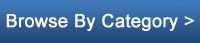
<style>
.page{position:relative;width:200px;height:43px}
.page>*{position:absolute;margin:0}
.t1{font:18px "ArialMT";color:#ffffff;font-weight:bold}
</style>
<div class="page">
<p class="t1" style="left:6px;top:13px;width:188px;height:18px">Browse By Category &gt;</p>
</div>
